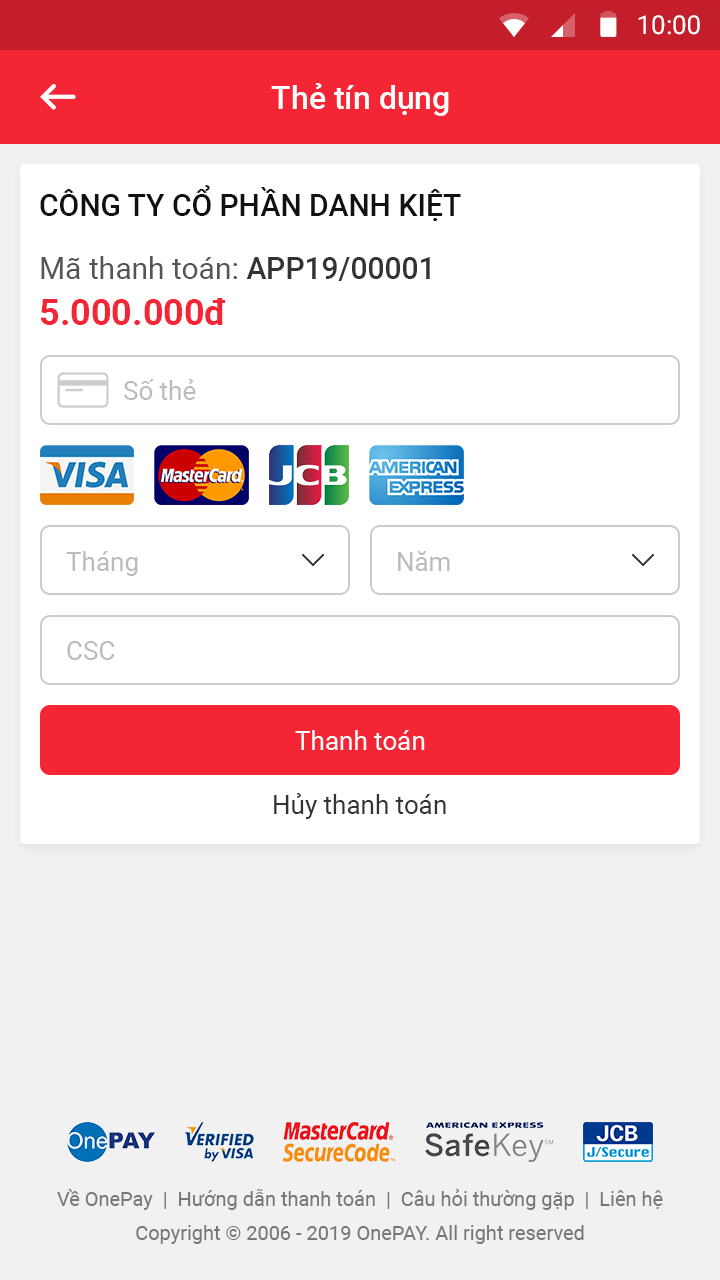
<style>
.page{position:relative;width:720px;height:1280px;background:#ffffff}
.page>*{position:absolute;margin:0}
.t1{font:26px "Roboto-Regular";color:#ffffff}
.t2{font:32px "Roboto-Medium";color:#ffffff}
.t3{font:30px "Roboto-Medium";color:#111111;text-transform:uppercase}
.t4{font:30px/46px "Roboto-Regular";color:#555555}
.t5{font:30px/46px "Roboto-Medium";color:#333333}
.t6{font:36px/46px "Roboto-Bold";color:#f42535}
.t7{font:26px "Roboto-Regular";color:#bbbbbb}
.t8{font:26px "Roboto-Regular";color:#333333}
.t9{font:20px/34px "Roboto-Regular";color:#777777}
</style>
<div class="page">
<p class="t1" style="left:638px;top:15px;width:62px;height:20px">10:00</p>
<p class="t2" style="left:271px;top:83px;width:178px;height:33px">Thẻ tín dụng</p>
<p class="t3" style="left:40px;top:185px;width:421px;height:36px">CÔNG TY CỔ PHẦN DANH KIỆT</p>
<p class="t4" style="left:40px;top:256px;width:390px;height:69px">Mã thanh toán: <span class="t5">APP19/00001<br></span><span class="t6">5.000.000đ</span></p>
<p class="t7" style="left:124px;top:379px;width:72px;height:21px">Số thẻ</p>
<p class="t7" style="left:66px;top:551px;width:72px;height:25px">Tháng</p>
<p class="t7" style="left:398px;top:551px;width:52px;height:20px">Năm</p>
<p class="t7" style="left:67px;top:641px;width:48px;height:19px">CSC</p>
<p class="t1" style="left:295px;top:730px;width:130px;height:20px">Thanh toán</p>
<p class="t8" style="left:274px;top:793px;width:172px;height:26px">Hủy thanh toán</p>
<p class="t9" style="left:57px;top:1189px;width:606px;height:55px;text-align:center">Về OnePay  |  Hướng dẫn thanh toán  |  Câu hỏi thường gặp  |  Liên hệ<br>Copyright © 2006 - 2019 OnePAY. All right reserved</p>
</div>
